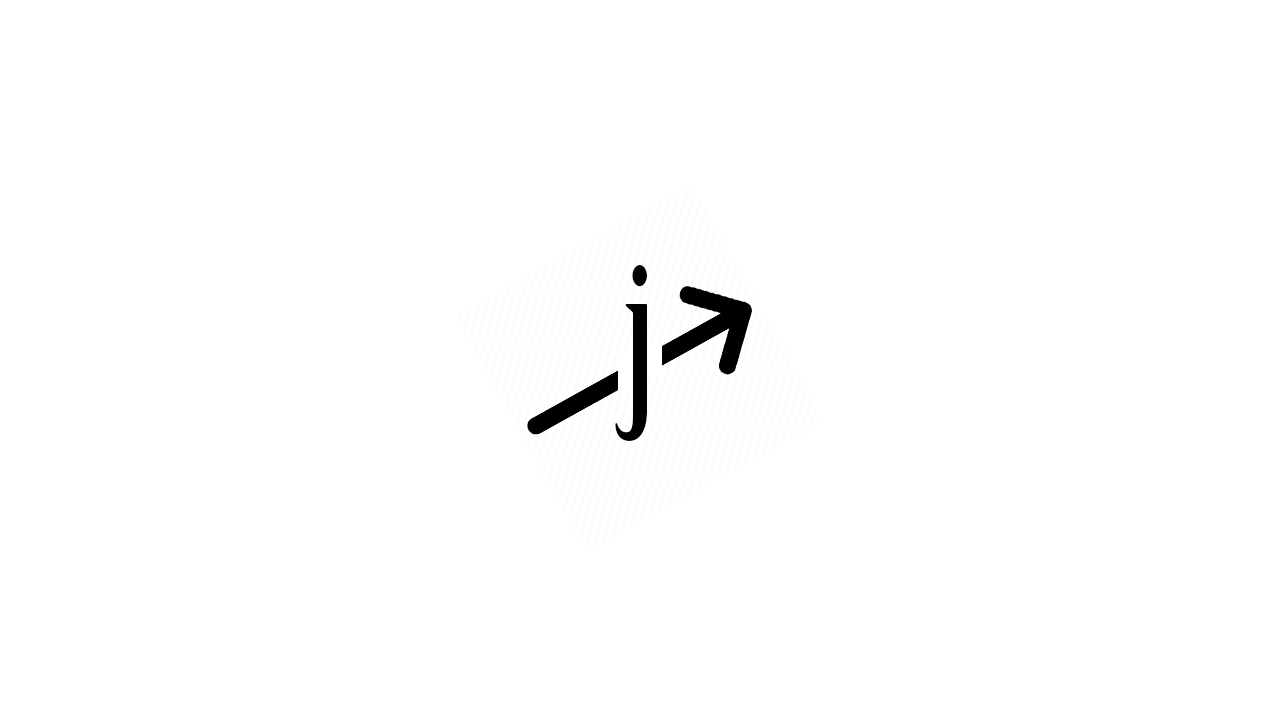
<style>
.page{position:relative;width:1280px;height:720px;background:#ffffff}
.page>*{position:absolute;margin:0}
.t1{font:200px "BirchStd";color:#000000}
</style>
<div class="page">
<p class="t1" style="left:615px;top:265px;width:32px;height:176px">j</p>
</div>
